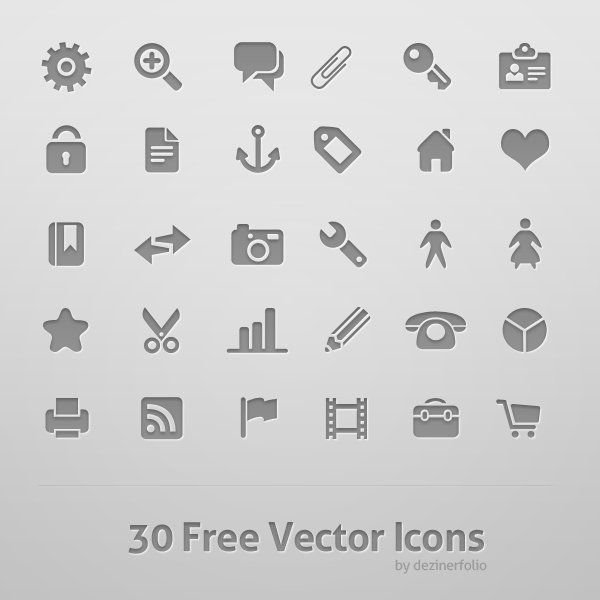
<style>
.page{position:relative;width:600px;height:600px}
.page>*{position:absolute;margin:0}
.t1{font:40px "Aller-Bold";letter-spacing:-0.02em;color:#838383}
.t2{font:14px "Aller";letter-spacing:-0.02em;color:#9b9a9a}
</style>
<div class="page">
<p class="t1" style="left:128px;top:522px;width:356px;height:32px">30 Free Vector Icons</p>
<p class="t2" style="left:395px;top:559px;width:92px;height:15px">by dezinerfolio</p>
</div>
